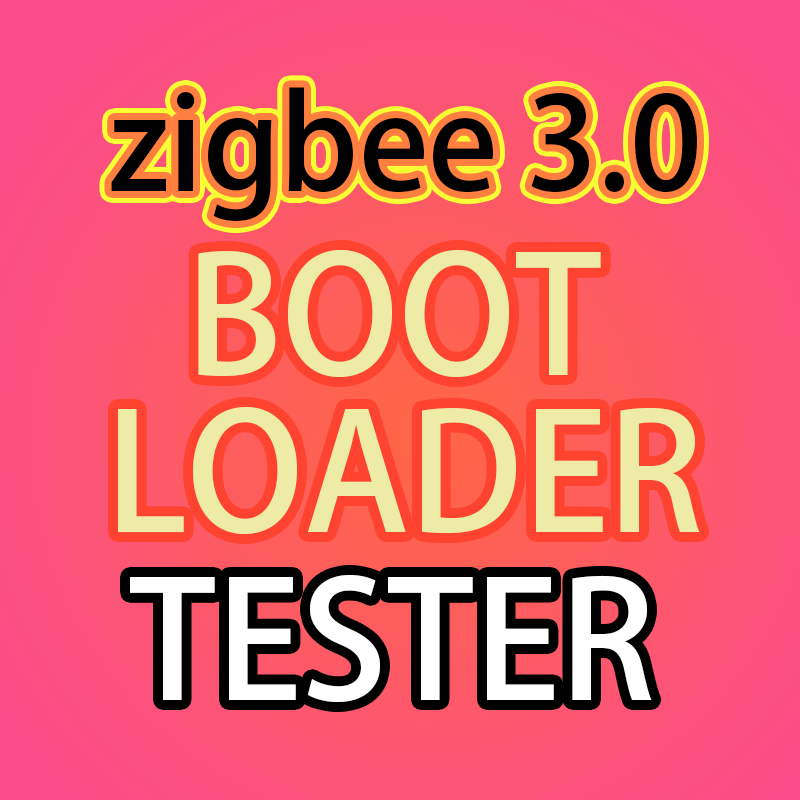
<style>
.page{position:relative;width:800px;height:800px}
.page>*{position:absolute;margin:0}
.t1{font:128px "AdobeHeitiStd-Regular";color:#000000}
.t2{font:160px "AdobeHeitiStd-Regular";color:#edeba6}
.t3{font:160px "AdobeHeitiStd-Regular";color:#ffffff}
</style>
<div class="page">
<p class="t1" style="left:111px;top:87px;width:586px;height:134px">zigbee 3.0</p>
<p class="t2" style="left:198px;top:250px;width:403px;height:128px">BOOT</p>
<p class="t2" style="left:118px;top:407px;width:582px;height:128px">LOADER</p>
<p class="t3" style="left:130px;top:575px;width:522px;height:127px">TESTER</p>
</div>
